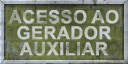
<style>
.page{position:relative;width:128px;height:64px}
.page>*{position:absolute;margin:0}
.t1{font:18px/16px "Arial-BoldMT";letter-spacing:-0.01em;text-transform:uppercase}
</style>
<div class="page">
<p class="t1" style="left:8px;top:10px;width:111px;height:46px;text-align:center">Acesso ao<br>gerador<br>auxiliar</p>
</div>
